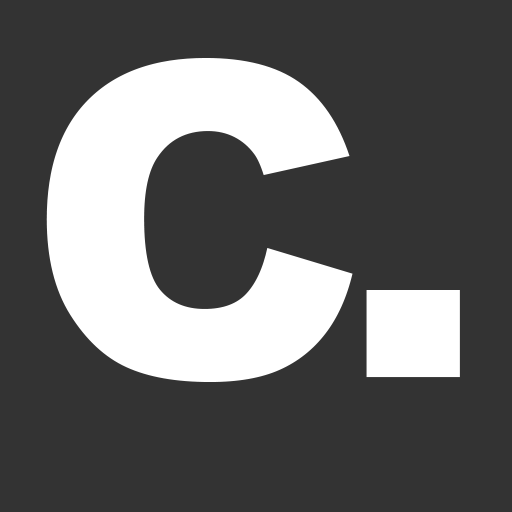
<style>
.page{position:relative;width:512px;height:512px;background:#333333}
.page>*{position:absolute;margin:0}
.t1{font:439.3px "Arial-Black";letter-spacing:-0.08em;color:#ffffff}
</style>
<div class="page">
<p class="t1" style="left:46px;top:58px;width:414px;height:324px">C.</p>
</div>
